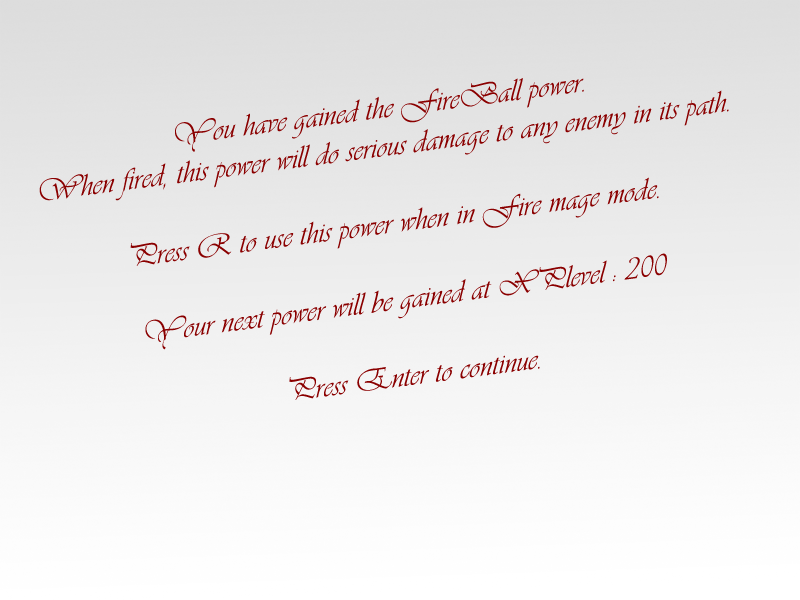
<style>
.page{position:relative;width:800px;height:600px}
.page>*{position:absolute;margin:0}
.t1{font:32px "Vivaldii";color:#8a0000}
</style>
<div class="page">
<p class="t1" style="left:39px;top:78px;width:690px;height:322px;text-align:center;rotate:-7deg">You have gained the FireBall power.<br>When fired, this power will do serious damage to any enemy in its path.<br><br>Press R to use this power when in Fire mage mode.<br><br>Your next power will be gained at XPlevel : 200<br><br>Press Enter to continue.</p>
</div>
